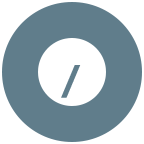
<style>
.page{position:relative;width:144px;height:144px;background:#607d8b}
.page>*{position:absolute;margin:0}
.t1{font:40px "NirmalaUI-Bold";color:#607d8b;text-transform:uppercase}
.t2{font:14px "OldEnglishTextMT";color:#9e9e9e;font-style:italic}
</style>
<div class="page">
<p class="t1" style="left:61px;top:65px;width:20px;height:33px"><span class="t2"><br><br><br>                </span>/</p>
</div>
